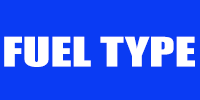
<style>
.page{position:relative;width:200px;height:100px;background:#0a3bf3}
.page>*{position:absolute;margin:0}
.t1{font:37.5px "Impact";letter-spacing:0.001em;color:#ffffff;scale:1.36 1}
</style>
<div class="page">
<p class="t1" style="left:4px;top:36px;width:191px;height:31px">FUEL TYPE</p>
</div>
